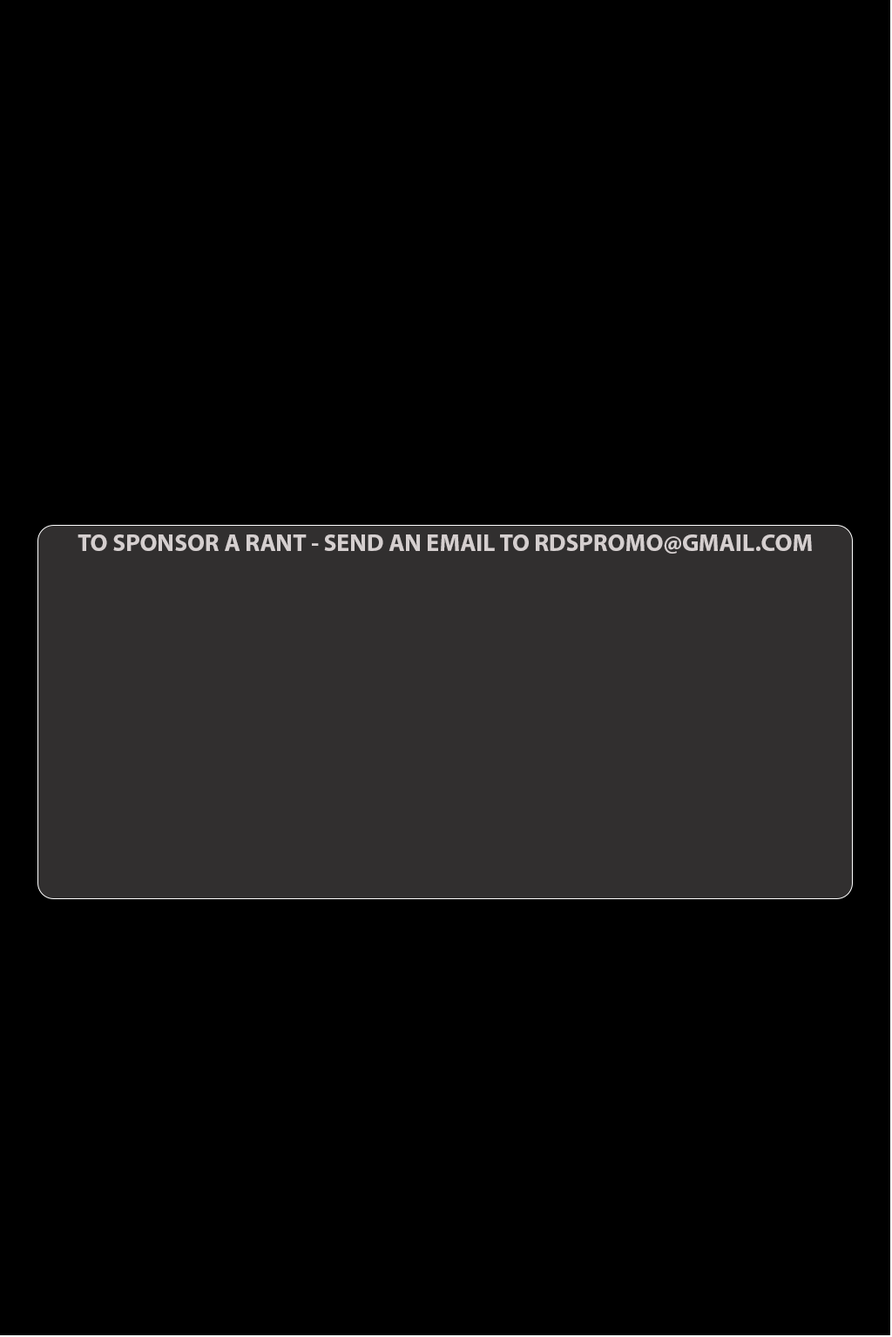
<style>
.page{position:relative;width:892px;height:1337px;background:#000000}
.page>*{position:absolute;margin:0}
.t1{font:24.4px "MyriadPro-Bold";color:#d5cfcf}
</style>
<div class="page">
<p class="t1" style="left:77px;top:535px;width:734px;height:19px">TO SPONSOR A RANT - SEND AN EMAIL TO RDSPROMO@GMAIL.COM</p>
</div>
